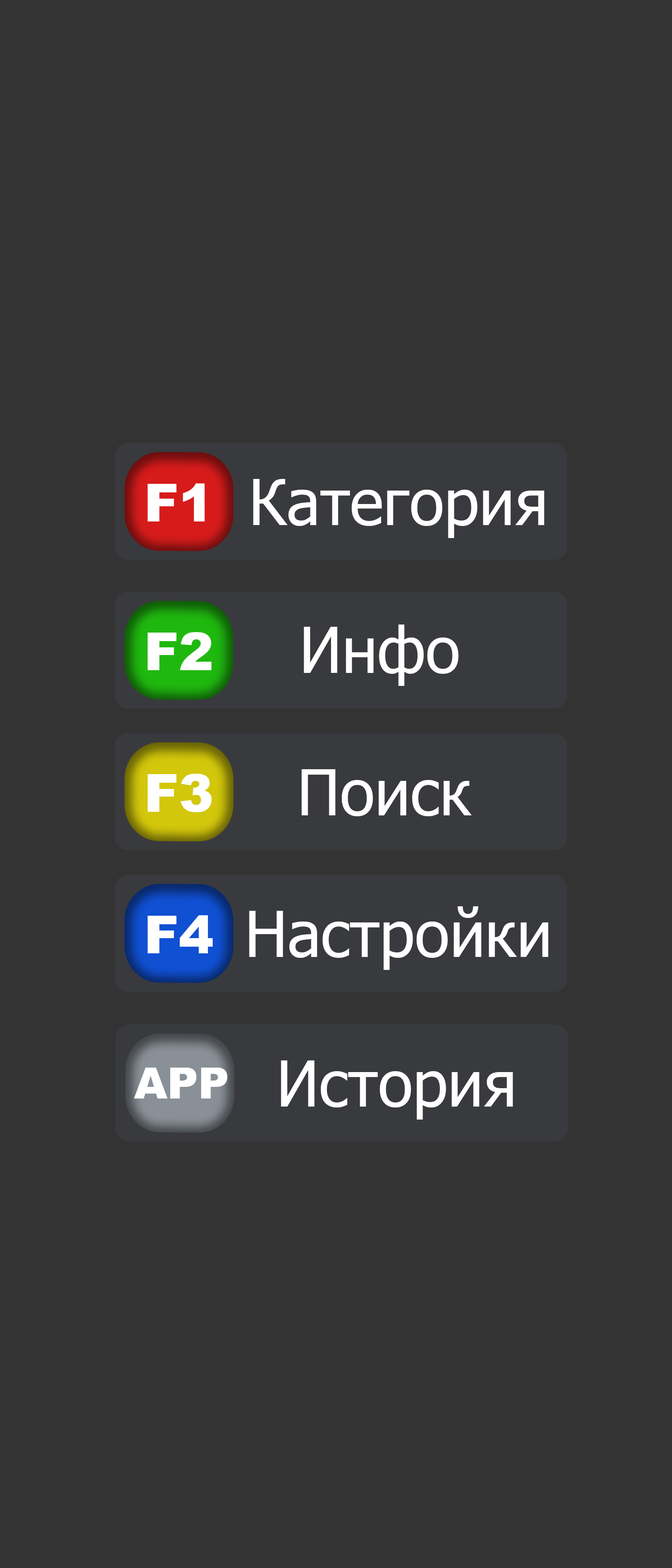
<style>
.page{position:relative;width:672px;height:1568px;background:#333333}
.page>*{position:absolute;margin:0}
.t1{font:52.3px "Arial-Black";color:#ffffff}
.t2{font:63.5px "Tahoma";color:#ffffff}
.t3{font:42.9px "Arial-Black";color:#ffffff}
</style>
<div class="page">
<p class="t1" style="left:147px;top:483px;width:58px;height:38px">F1</p>
<p class="t2" style="left:253px;top:479px;width:291px;height:59px">Категория</p>
<p class="t2" style="left:304px;top:625px;width:155px;height:61px">Инфо</p>
<p class="t1" style="left:147px;top:632px;width:64px;height:38px">F2</p>
<p class="t1" style="left:147px;top:774px;width:65px;height:38px">F3</p>
<p class="t2" style="left:302px;top:769px;width:170px;height:47px">Поиск</p>
<p class="t1" style="left:147px;top:915px;width:66px;height:38px">F4</p>
<p class="t2" style="left:249px;top:906px;width:299px;height:64px">Настройки</p>
<p class="t2" style="left:281px;top:1060px;width:232px;height:60px">История</p>
<p class="t3" style="left:134px;top:1068px;width:94px;height:30px">APP</p>
</div>
